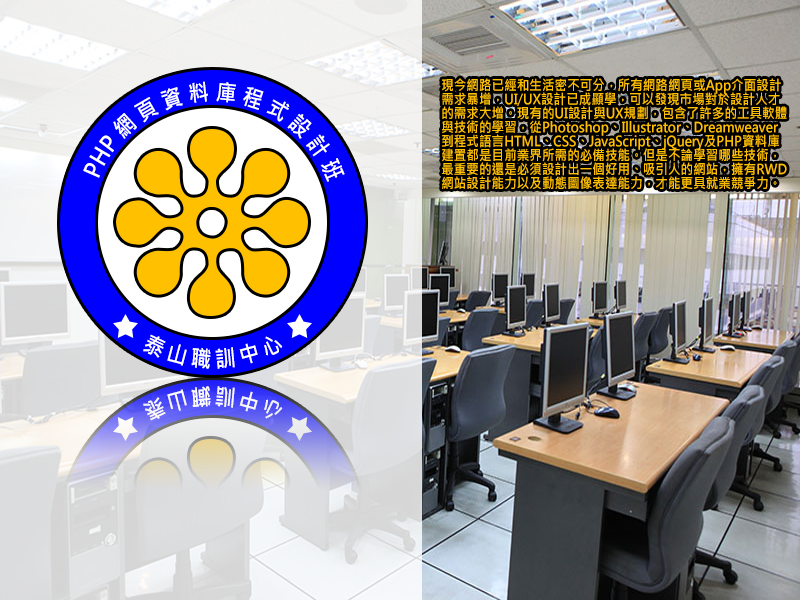
<style>
.page{position:relative;width:800px;height:600px}
.page>*{position:absolute;margin:0}
.t1{font:14px/14px "MicrosoftJhengHeiBold";color:#ffc000;scale:0.9 1}
.t2{font:22.9px "MicrosoftJhengHeiBold";color:#ffffff;scale:0.9 1}
</style>
<div class="page">
<p class="t1" style="left:442px;top:78px;width:345px;height:112px">現今網路已經和生活密不可分，所有網路網頁或App介面設計需求暴增，UI/UX設計已成顯學，可以發現市場對於設計人才的需求大增。現有的UI設計與UX規劃，包含了許多的工具軟體與技術的學習，從Photoshop、Illustrator、Dreamweaver到程式語言HTML、CSS、JavaScript、jQuery及PHP資料庫建置都是目前業界所需的必備技能。但是不論學習哪些技術，最重要的還是必須設計出一個好用、吸引人的網站，擁有RWD網站設計能力以及動態圖像表達能力，才能更具就業競爭力。</p>
<p class="t2" style="left:143px;top:334px;width:140px;height:35px">泰 山 職 訓 中 心</p>
<p class="t2" style="left:143px;top:386px;width:140px;height:35px">泰 山 職 訓 中 心</p>
</div>
